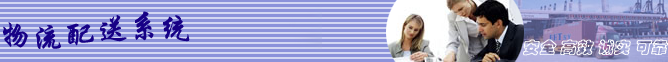
<style>
.page{position:relative;width:668px;height:62px;background:#8b92da}
.page>*{position:absolute;margin:0}
.t1{font:32px "STXingkai";color:#170186}
.t2{font:16px "STCaiyun";color:#ffffff;font-weight:bold;font-style:italic}
</style>
<div class="page">
<p class="t1" style="left:3px;top:11px;width:187px;height:38px">物流配送系统</p>
<p class="t2" style="left:523px;top:39px;width:145px;height:17px">安全 高效 诚实 可靠</p>
</div>
